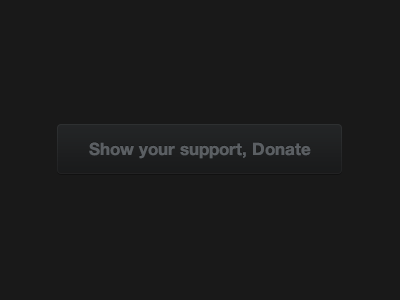
<style>
.page{position:relative;width:400px;height:300px;background:#191919}
.page>*{position:absolute;margin:0}
.t1{font:17px "HelveticaNeue-Bold";color:#5b5f63}
</style>
<div class="page">
<p class="t1" style="left:89px;top:142px;width:222px;height:17px">Show your support, Donate</p>
</div>
